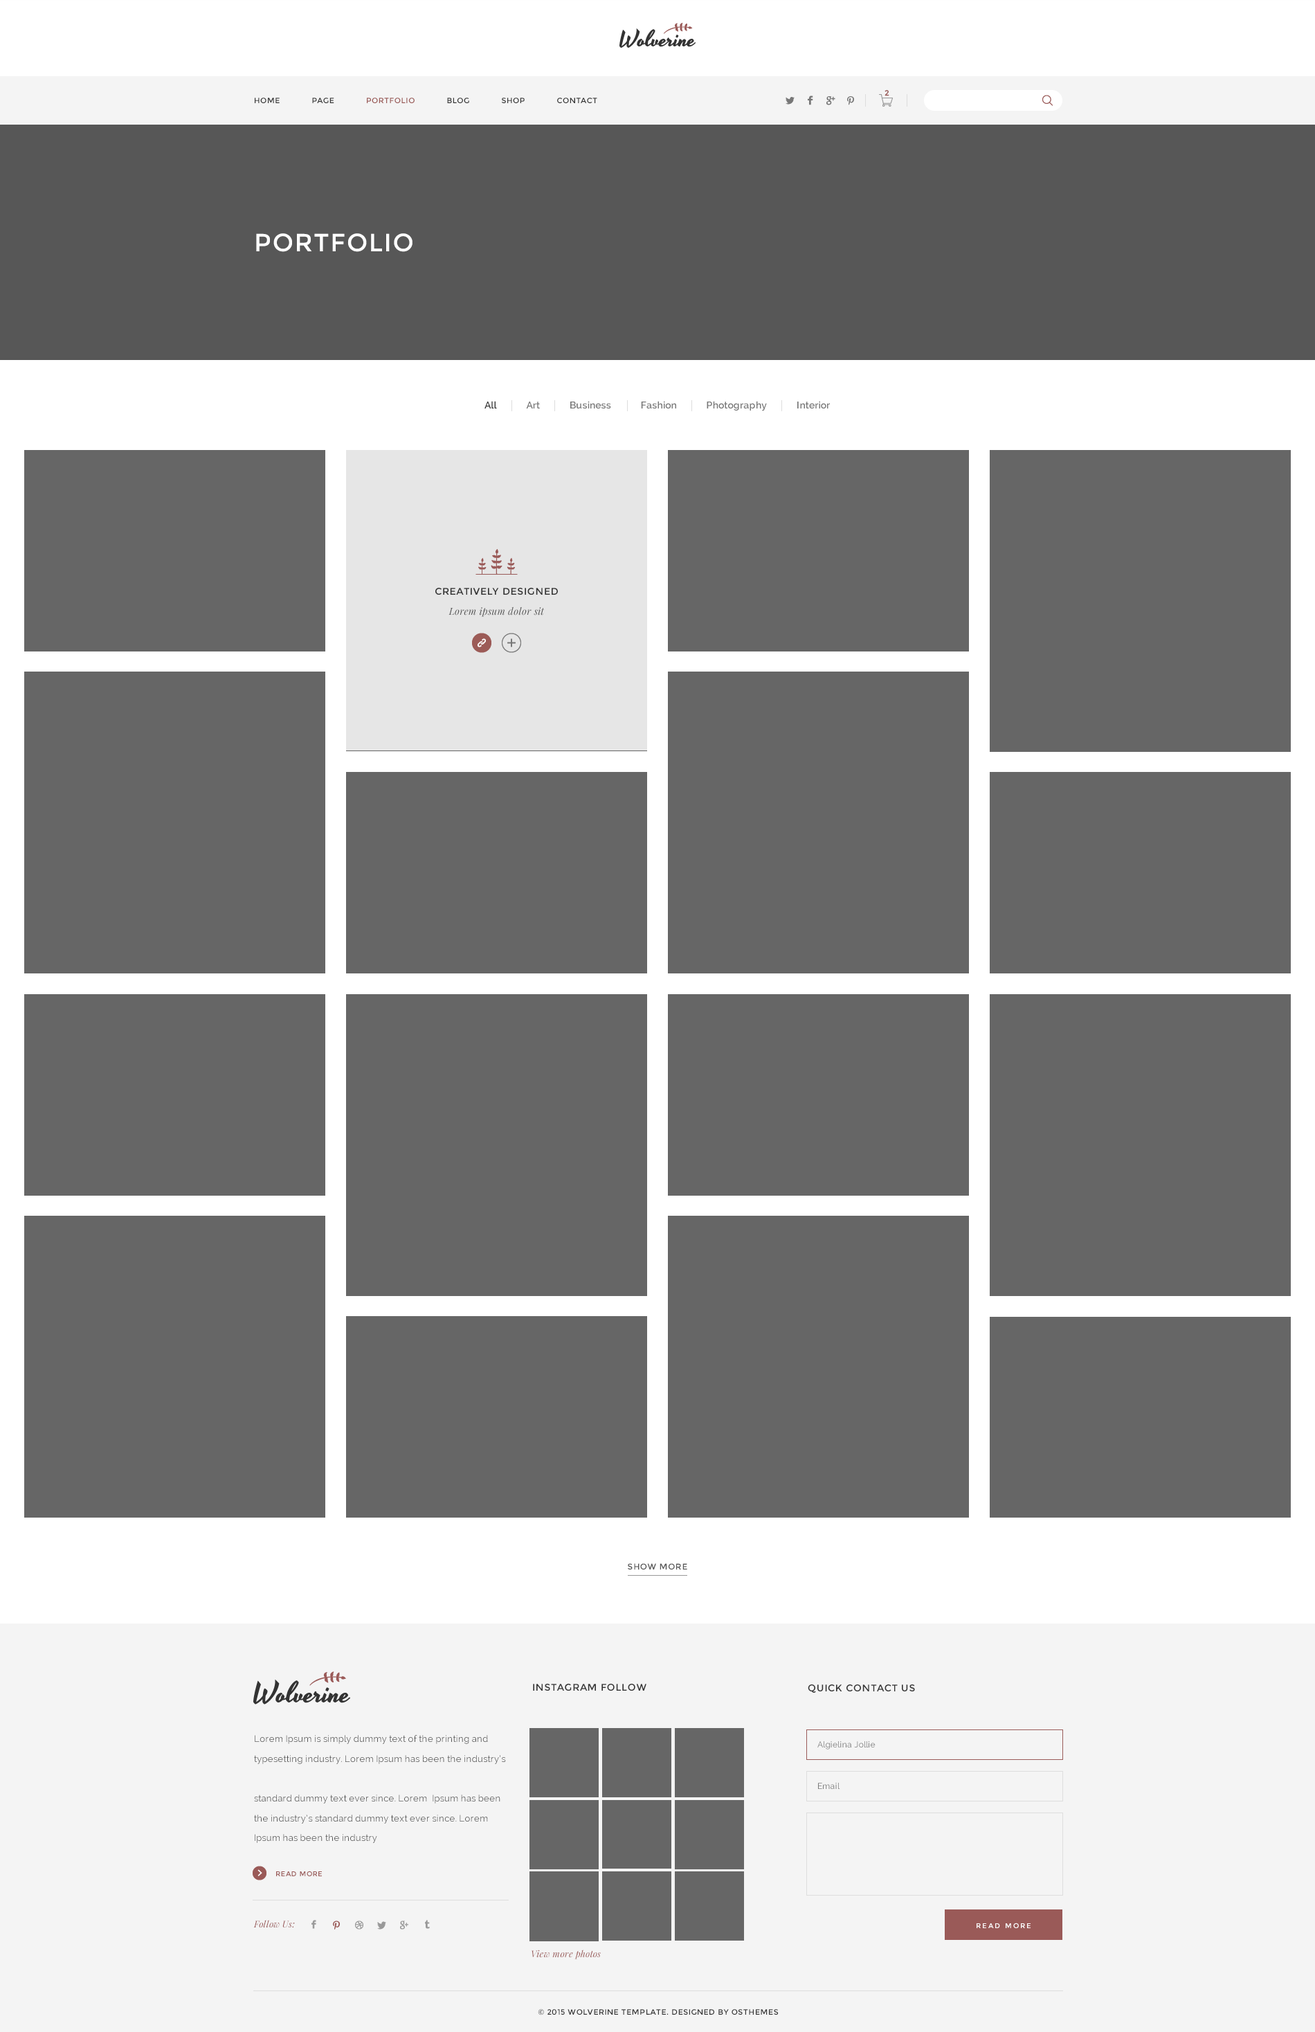
<style>
.page{position:relative;width:1315px;height:2032px;background:#666666}
.page>*{position:absolute;margin:0}
.t1{font:7.6px "Montserrat-Regular";letter-spacing:0.05em;color:#333333}
.t2{font:7.6px "Montserrat-Regular";letter-spacing:0.05em;color:#9b5a57}
.t3{font:7.6px "Montserrat-Regular";color:#9a5a58;font-weight:bold}
.t4{font:24.9px "Montserrat-Regular";letter-spacing:0.05em;color:#ffffff}
.t5{font:9.7px "Raleway-SemiBold";letter-spacing:0.02em;color:#777777}
.t6{font:9.7px "Raleway-SemiBold";letter-spacing:0.02em;color:#333333}
.t7{font:9.7px "Montserrat-Regular";letter-spacing:0.05em;color:#333333}
.t8{font:9.7px "PlayfairDisplay-Italic";letter-spacing:0.02em;color:#545454}
.t9{font:8.3px "Montserrat-Regular";letter-spacing:0.05em;color:#555555}
.t10{font:9px/19.8px "Raleway";letter-spacing:0.02em;color:#555555}
.t11{font:8.3px "Raleway";letter-spacing:0.02em;color:#777777}
.t12{font:6.9px "Montserrat-Regular";letter-spacing:0.05em;color:#9a5a58}
.t13{font:9px "PlayfairDisplay-Italic";letter-spacing:0.02em;color:#995958}
.t14{font:6.9px "Montserrat-Regular";letter-spacing:0.2em;color:#ffffff}
.t15{font:9px "PlayfairDisplay-Italic";letter-spacing:0.02em;color:#9a5a58}
</style>
<div class="page">
<p class="t1" style="left:255px;top:98px;width:342px;height:5px">HOME      PAGE      <span class="t2">PORTFOLIO</span>      BLOG      SHOP      CONTACT</p>
<p class="t3" style="left:885px;top:90px;width:5px;height:6px">2</p>
<p class="t4" style="left:256px;top:233px;width:157px;height:19px">PORTFOLIO</p>
<p class="t5" style="left:485px;top:401px;width:345px;height:10px"><span class="t6">All</span>             Art             Business             Fashion             Photography             Interior</p>
<p class="t7" style="left:435px;top:588px;width:123px;height:7px">CREATIVELY DESIGNED</p>
<p class="t8" style="left:449px;top:606px;width:96px;height:11px">Lorem ipsum dolor sit</p>
<p class="t9" style="left:628px;top:1563px;width:59px;height:6px">SHOW MORE</p>
<p class="t7" style="left:533px;top:1684px;width:114px;height:7px">INSTAGRAM FOLLOW</p>
<p class="t7" style="left:808px;top:1684px;width:107px;height:9px">QUICK CONTACT US</p>
<p class="t10" style="left:254px;top:1735px;width:252px;height:108px">Lorem Ipsum is simply dummy text of the printing and typesetting industry. Lorem Ipsum has been the industry’s <br> <br>standard dummy text ever since. Lorem  Ipsum has been the industry’s standard dummy text ever since. Lorem  Ipsum has been the industry</p>
<p class="t11" style="left:818px;top:1741px;width:58px;height:8px">Algielina Jollie</p>
<p class="t11" style="left:818px;top:1783px;width:22px;height:6px">Email</p>
<p class="t12" style="left:276px;top:1871px;width:46px;height:5px">READ MORE</p>
<p class="t13" style="left:253px;top:1920px;width:42px;height:8px">Follow Us:</p>
<p class="t14" style="left:977px;top:1923px;width:54px;height:5px">READ MORE</p>
<p class="t15" style="left:532px;top:1950px;width:69px;height:9px">View more photos</p>
<p class="t1" style="left:538px;top:2009px;width:241px;height:6px">© 2015 WOLVERINE TEMPLATE. DESIGNED BY OSTHEMES</p>
</div>
